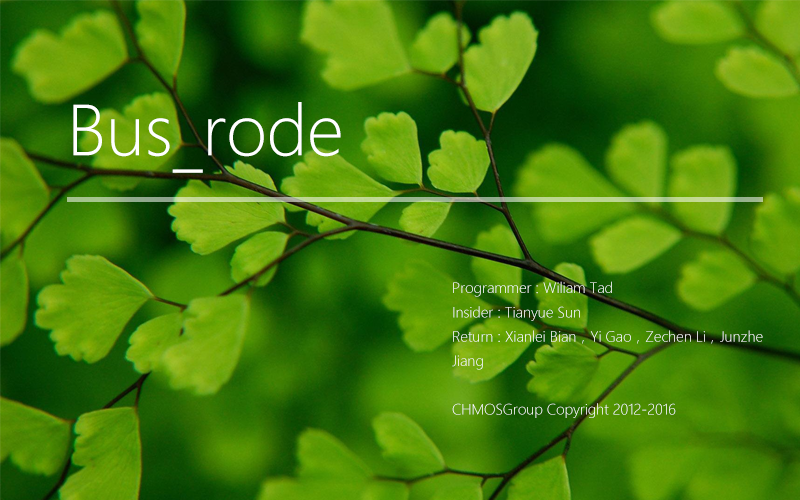
<style>
.page{position:relative;width:800px;height:500px}
.page>*{position:absolute;margin:0}
.t1{font:66.7px "MicrosoftYaHeiLight";color:#ffffff}
.t2{font:13.9px "MicrosoftYaHeiLight";color:#ffffff}
</style>
<div class="page">
<p class="t1" style="left:73px;top:102px;width:268px;height:71px">Bus_rode</p>
<p class="t2" style="left:452px;top:281px;width:311px;height:137px">Programmer : Wiliam Tad<br>Insider : Tianyue Sun<br>Return : Xianlei Bian，Yi Gao，Zechen Li，Junzhe Jiang<br><br>CHMOSGroup Copyright 2012-2016</p>
</div>
